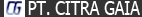
<style>
.page{position:relative;width:142px;height:17px;background:#333333}
.page>*{position:absolute;margin:0}
.t1{font:19.4px "Tahoma";color:#ffffff;scale:0.81 1}
</style>
<div class="page">
<p class="t1" style="left:28px;top:1px;width:112px;height:14px">PT. CITRA GAIA</p>
</div>
